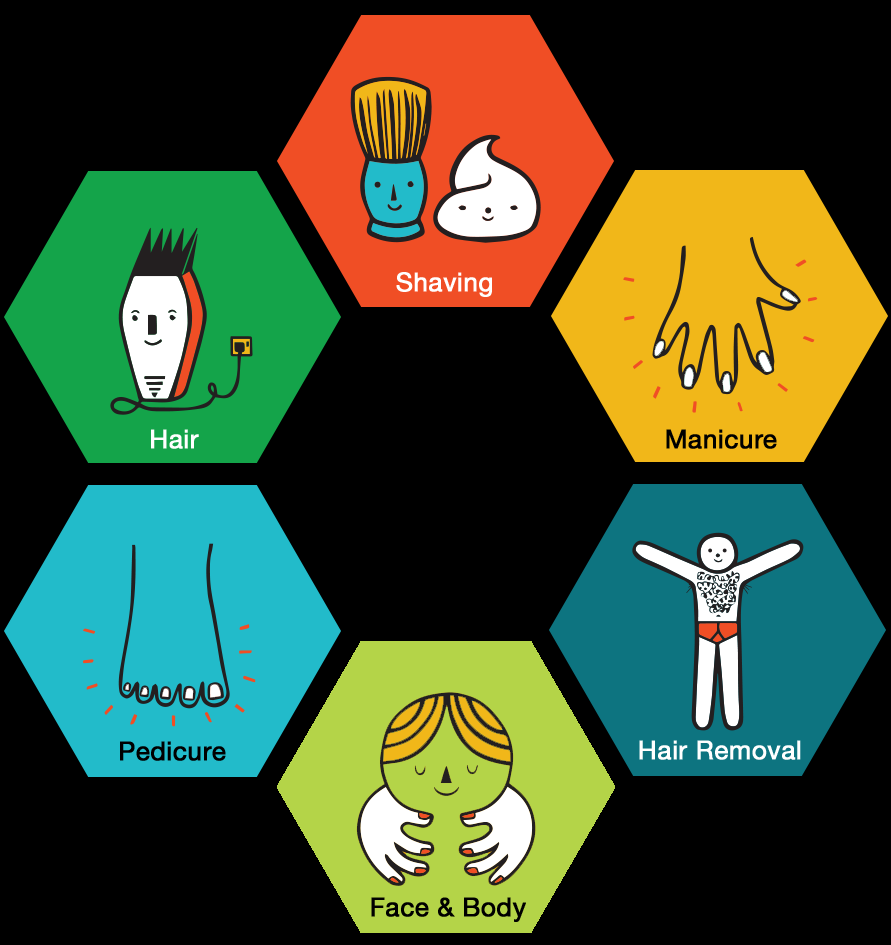
<style>
.page{position:relative;width:891px;height:945px;background:#000000}
.page>*{position:absolute;margin:0}
.t1{font:26px "HelveticaNeue";color:#ffffff;font-weight:bold}
.t2{font:26px "HelveticaNeue";color:#000000;font-weight:bold}
</style>
<div class="page">
<p class="t1" style="left:396px;top:272px;width:96px;height:25px">Shaving</p>
<p class="t1" style="left:151px;top:429px;width:48px;height:20px">Hair</p>
<p class="t2" style="left:666px;top:429px;width:111px;height:20px">Manicure</p>
<p class="t2" style="left:120px;top:741px;width:106px;height:20px">Pedicure</p>
<p class="t1" style="left:639px;top:740px;width:162px;height:20px">Hair Removal</p>
<p class="t2" style="left:371px;top:897px;width:155px;height:25px">Face &amp; Body</p>
</div>
